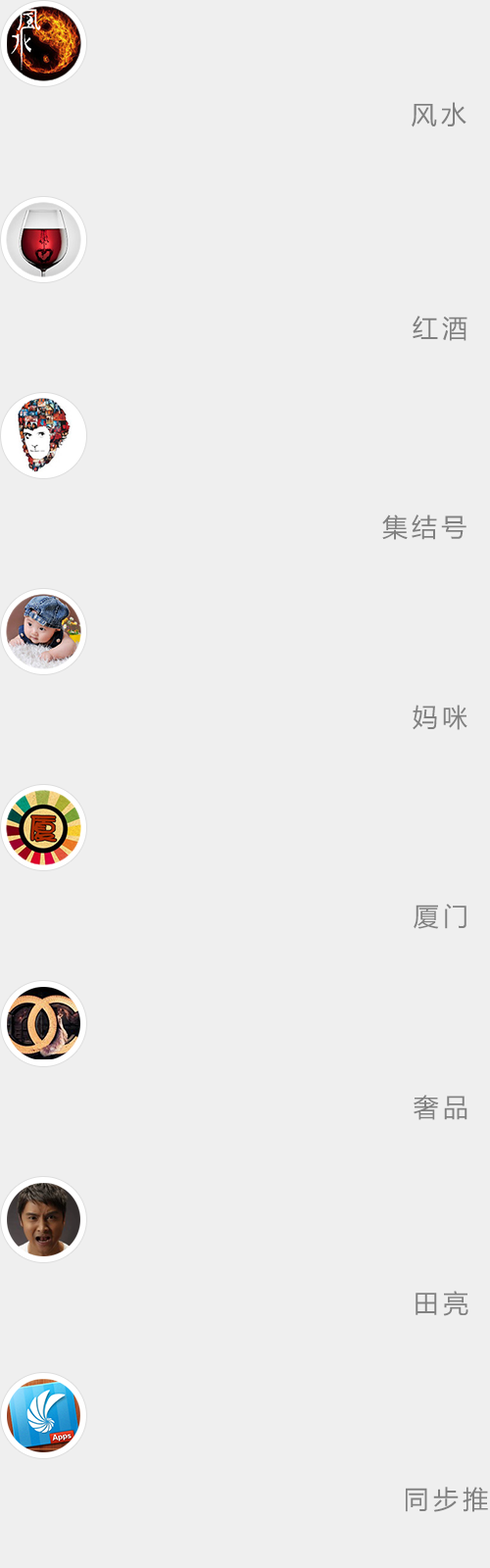
<style>
.page{position:relative;width:490px;height:1568px;background:#efefef}
.page>*{position:absolute;margin:0}
.t1{font:25.5px "MicrosoftYaHei";letter-spacing:0.16em;color:#808080}
</style>
<div class="page">
<p class="t1" style="left:412px;top:102px;width:54px;height:25px">风水</p>
<p class="t1" style="left:413px;top:316px;width:54px;height:25px">红酒</p>
<p class="t1" style="left:382px;top:514px;width:84px;height:26px">集结号</p>
<p class="t1" style="left:413px;top:705px;width:54px;height:25px">妈咪</p>
<p class="t1" style="left:414px;top:904px;width:52px;height:25px">厦门</p>
<p class="t1" style="left:414px;top:1095px;width:53px;height:25px">奢品</p>
<p class="t1" style="left:416px;top:1291px;width:52px;height:25px">田亮</p>
<p class="t1" style="left:406px;top:1487px;width:82px;height:25px">同步推</p>
</div>
